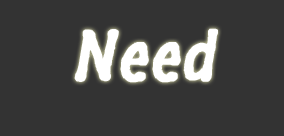
<style>
.page{position:relative;width:284px;height:136px;background:#333333}
.page>*{position:absolute;margin:0}
.t1{font:72px "SegoeMarker";color:#ffffff;font-weight:bold;font-style:italic}
</style>
<div class="page">
<p class="t1" style="left:74px;top:28px;width:144px;height:55px">Need</p>
</div>
